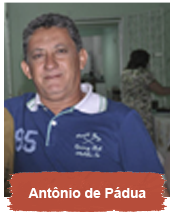
<style>
.page{position:relative;width:175px;height:214px}
.page>*{position:absolute;margin:0}
.t1{font:13.8px "Arial-BoldMT";color:#ffffff}
</style>
<div class="page">
<p class="t1" style="left:28px;top:187px;width:118px;height:11px">Antônio de Pádua</p>
</div>
